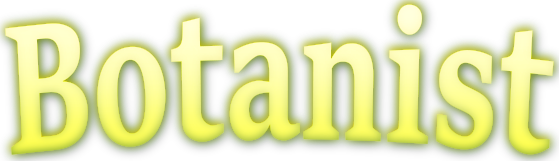
<style>
.page{position:relative;width:559px;height:161px}
.page>*{position:absolute;margin:0}
.t1{font:197.5px "SitkaText-Bold";scale:0.65 1}
</style>
<div class="page">
<p class="t1" style="left:5px;top:4px;width:549px;height:151px">Botanist</p>
</div>
